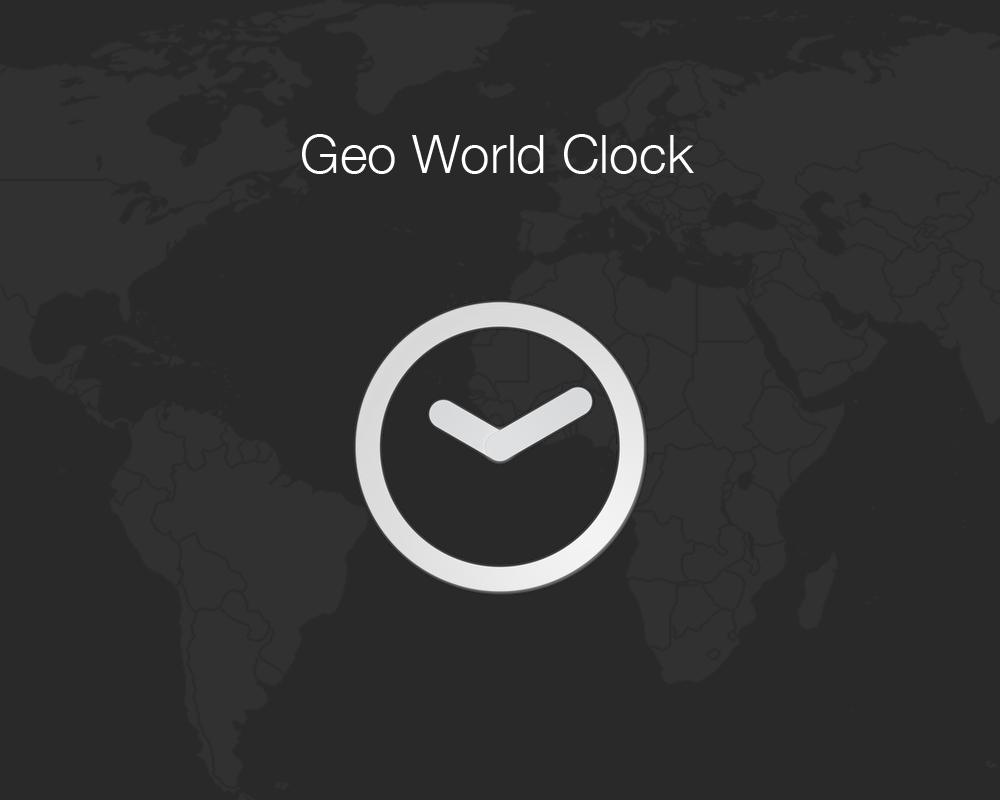
<style>
.page{position:relative;width:1000px;height:800px;background:#292929}
.page>*{position:absolute;margin:0}
.t1{font:53.3px "HelveticaNeue-Light";color:#ffffff}
.t2{font:53.3px "HelveticaNeue-Light";letter-spacing:-0.08em;color:#ffffff}
</style>
<div class="page">
<p class="t1" style="left:302px;top:134px;width:392px;height:40px">Geo World Cloc<span class="t2">k</span></p>
</div>
